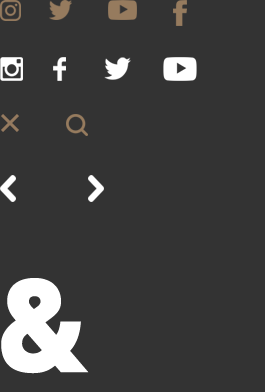
<style>
.page{position:relative;width:265px;height:392px;background:#333333}
.page>*{position:absolute;margin:0}
.t1{font:131.1px "DINPro-Black";letter-spacing:0.34em;color:#ffffff}
</style>
<div class="page">
<p class="t1" style="left:1px;top:278px;width:88px;height:96px">&amp;</p>
</div>
